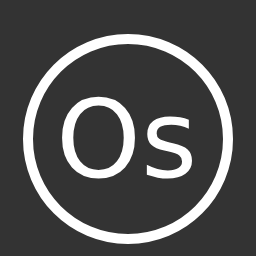
<style>
.page{position:relative;width:256px;height:256px;background:#333333}
.page>*{position:absolute;margin:0}
.t1{font:108px "DejaVuSans";color:#ffffff}
</style>
<div class="page">
<p class="t1" style="left:62px;top:96px;width:130px;height:83px">Os</p>
</div>
